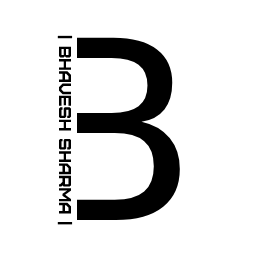
<style>
.page{position:relative;width:256px;height:256px;background:#ffffff}
.page>*{position:absolute;margin:0}
.t1{font:17px "Furore";color:#000000}
</style>
<div class="page">
<p class="t1" style="left:57px;top:35px;width:16px;height:190px;rotate:90deg">| BHAVESH SHARMA |</p>
</div>
